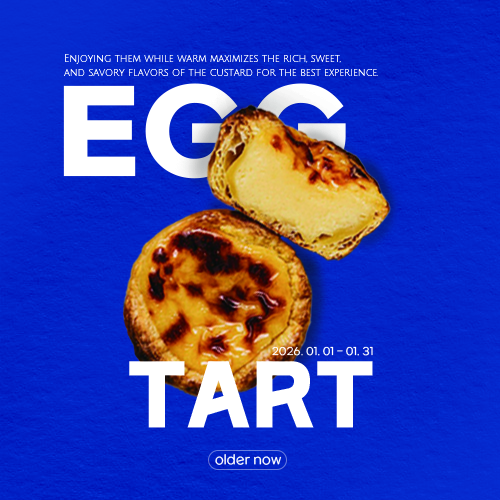
<style>
.page{position:relative;width:500px;height:500px}
.page>*{position:absolute;margin:0}
.t1{font:9.8px/13.8px "JuliusSansOne-Regular";color:#ffffff}
.t2{font:10.3px "SBAggroL";color:#ffffff}
.t3{font:83.4px "SBAggroB";color:#ffffff;scale:0.93 1}
.t4{font:13px "SBAggroL";color:#ffffff;scale:0.92 1}
</style>
<div class="page">
<p class="t1" style="left:64px;top:54px;width:314px;height:22px">Enjoying them while warm maximizes the rich, sweet,<br>and savory flavors of the custard for the best experience.</p>
<p class="t2" style="left:272px;top:346px;width:101px;height:10px">2026. 01. 01 - 01. 31</p>
<p class="t3" style="left:129px;top:361px;width:244px;height:67px">TART</p>
<p class="t4" style="left:215px;top:454px;width:67px;height:11px">older now</p>
</div>
